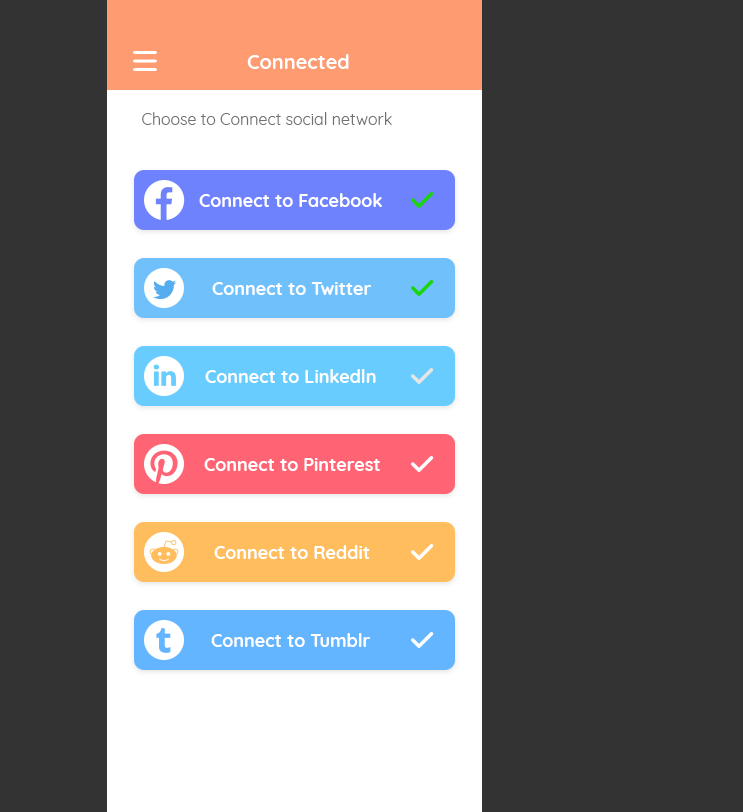
<style>
.page{position:relative;width:743px;height:812px;background:#333333}
.page>*{position:absolute;margin:0}
.t1{font:20px "Quicksand-Bold";color:#ffffff}
.t2{font:16px "Quicksand-Regular";color:#707070}
.t3{font:18px "Quicksand-Bold";color:#ffffff}
</style>
<div class="page">
<p class="t1" style="left:247px;top:54px;width:102px;height:15px">Connected</p>
<p class="t2" style="left:142px;top:112px;width:250px;height:13px">Choose to Connect social network</p>
<p class="t3" style="left:199px;top:193px;width:183px;height:14px">Connect to Facebook</p>
<p class="t3" style="left:212px;top:282px;width:159px;height:13px">Connect to Twitter</p>
<p class="t3" style="left:205px;top:369px;width:171px;height:14px">Connect to Linkedln</p>
<p class="t3" style="left:204px;top:458px;width:176px;height:13px">Connect to Pinterest</p>
<p class="t3" style="left:214px;top:545px;width:156px;height:14px">Connect to Reddit</p>
<p class="t3" style="left:211px;top:633px;width:159px;height:14px">Connect to Tumblr</p>
</div>
